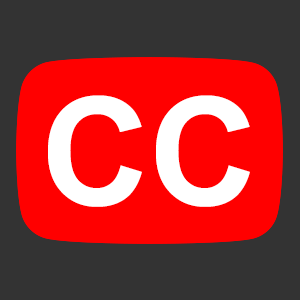
<style>
.page{position:relative;width:300px;height:300px;background:#333333}
.page>*{position:absolute;margin:0}
.t1{font:150px "Arial-BoldMT";color:#ffffff}
</style>
<div class="page">
<p class="t1" style="left:48px;top:95px;width:202px;height:112px">CC</p>
</div>
